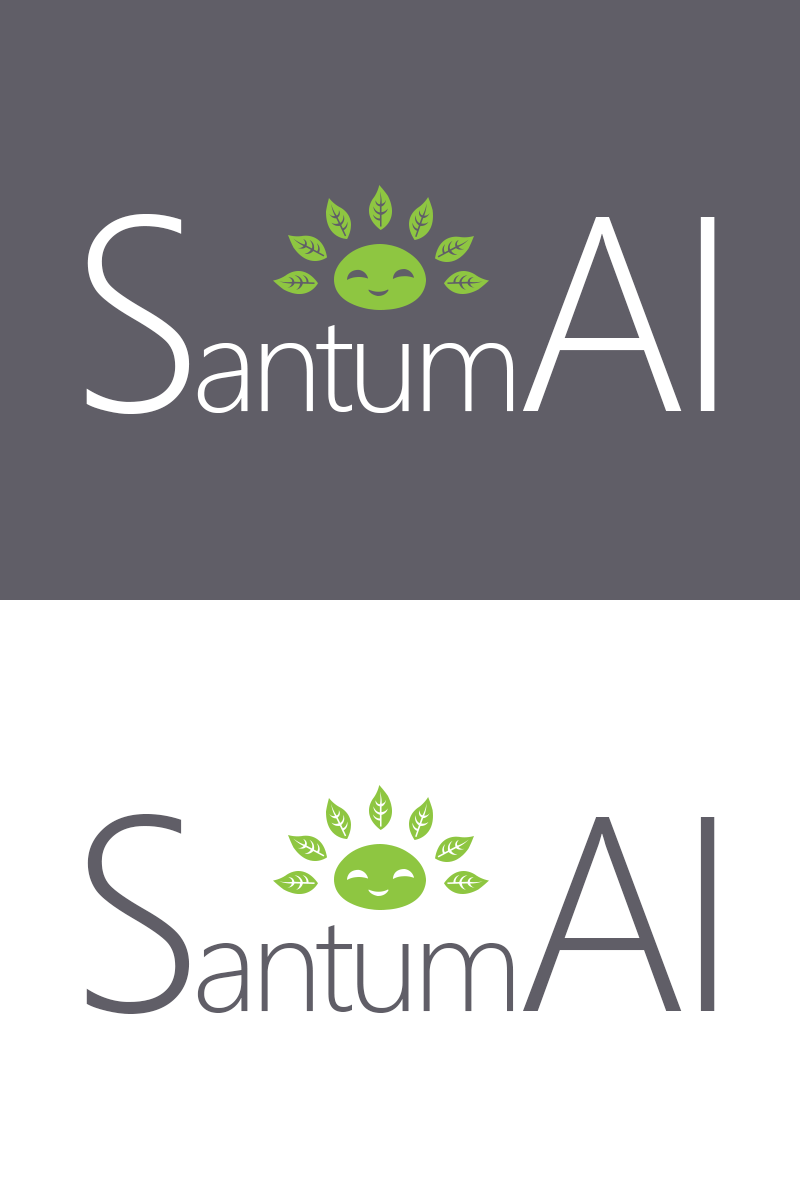
<style>
.page{position:relative;width:800px;height:1200px;background:#605e67}
.page>*{position:absolute;margin:0}
.t1{font:133.1px "SegoeUI-Light";letter-spacing:-0.05em;color:#ffffff}
.t2{font:277.3px "SegoeUI-Light";letter-spacing:-0.05em;color:#ffffff}
.t3{font:133.1px "SegoeUI-Light";letter-spacing:-0.05em;color:#605e67}
.t4{font:277.3px "SegoeUI-Light";letter-spacing:-0.05em;color:#605e67}
</style>
<div class="page">
<p class="t1" style="left:86px;top:214px;width:629px;height:200px"><span class="t2">S</span>antum<span class="t2">AI</span></p>
<p class="t3" style="left:86px;top:814px;width:629px;height:200px"><span class="t4">S</span>antum<span class="t4">AI</span></p>
</div>
